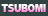
<style>
.page{position:relative;width:48px;height:16px;background:#314242}
.page>*{position:absolute;margin:0}
.t1{font:10.8px "Arial-Black";scale:0.78 1}
</style>
<div class="page">
<p class="t1" style="left:1px;top:4px;width:45px;height:8px">TSUBOMI</p>
</div>
